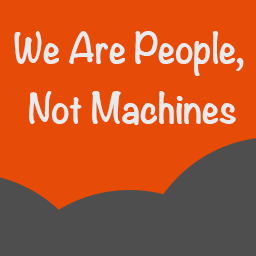
<style>
.page{position:relative;width:256px;height:256px;background:#e64b07}
.page>*{position:absolute;margin:0}
.t1{font:36.9px/60px "Noteworthy-Bold";color:#eaeaea}
</style>
<div class="page">
<p class="t1" style="left:14px;top:31px;width:230px;height:94px;text-align:center">We Are People,<br> Not Machines</p>
</div>
